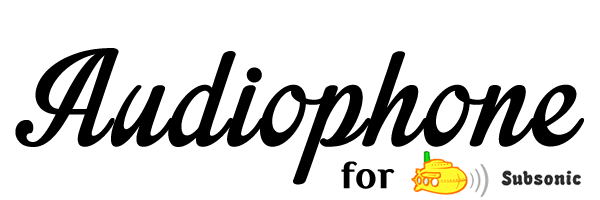
<style>
.page{position:relative;width:600px;height:200px;background:#ffffff}
.page>*{position:absolute;margin:0}
.t1{font:184px "ImpregnablePersonalUseOnly";letter-spacing:-0.005em;color:#000000;font-weight:bold}
.t2{font:67px "Philosopher-Bold";letter-spacing:-0.005em;color:#000000;font-weight:bold}
</style>
<div class="page">
<p class="t1" style="left:15px;top:48px;width:569px;height:137px">Audiophone</p>
<p class="t2" style="left:341px;top:161px;width:54px;height:28px">for</p>
</div>
